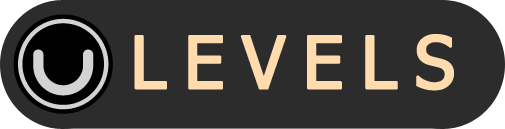
<style>
.page{position:relative;width:505px;height:129px;background:#2c2c2c}
.page>*{position:absolute;margin:0}
.t1{font:72px "Tahoma";letter-spacing:0.22em;color:#ffdbad;font-weight:bold}
</style>
<div class="page">
<p class="t1" style="left:134px;top:34px;width:320px;height:57px">LEVELS</p>
</div>
